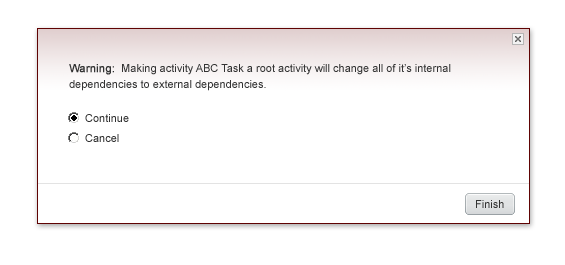
<style>
.page{position:relative;width:565px;height:265px;background:#ffffff}
.page>*{position:absolute;margin:0}
.t1{font:11px/16px "ArialMT";color:#333333}
.t2{font:11px/16px "ArialMT";color:#333333;font-weight:bold}
.t3{font:11px/20px "ArialMT";color:#303030}
.t4{font:11px "ArialMT";color:#333333}
</style>
<div class="page">
<p class="t1" style="left:69px;top:64px;width:382px;height:27px"><span class="t2">Warning:</span>  Making activity ABC Task a root activity will change all of it’s internal<br>dependencies to external dependencies.</p>
<p class="t3" style="left:85px;top:114px;width:44px;height:28px">Continue<br>Cancel</p>
<p class="t4" style="left:476px;top:200px;width:28px;height:8px">Finish</p>
</div>
